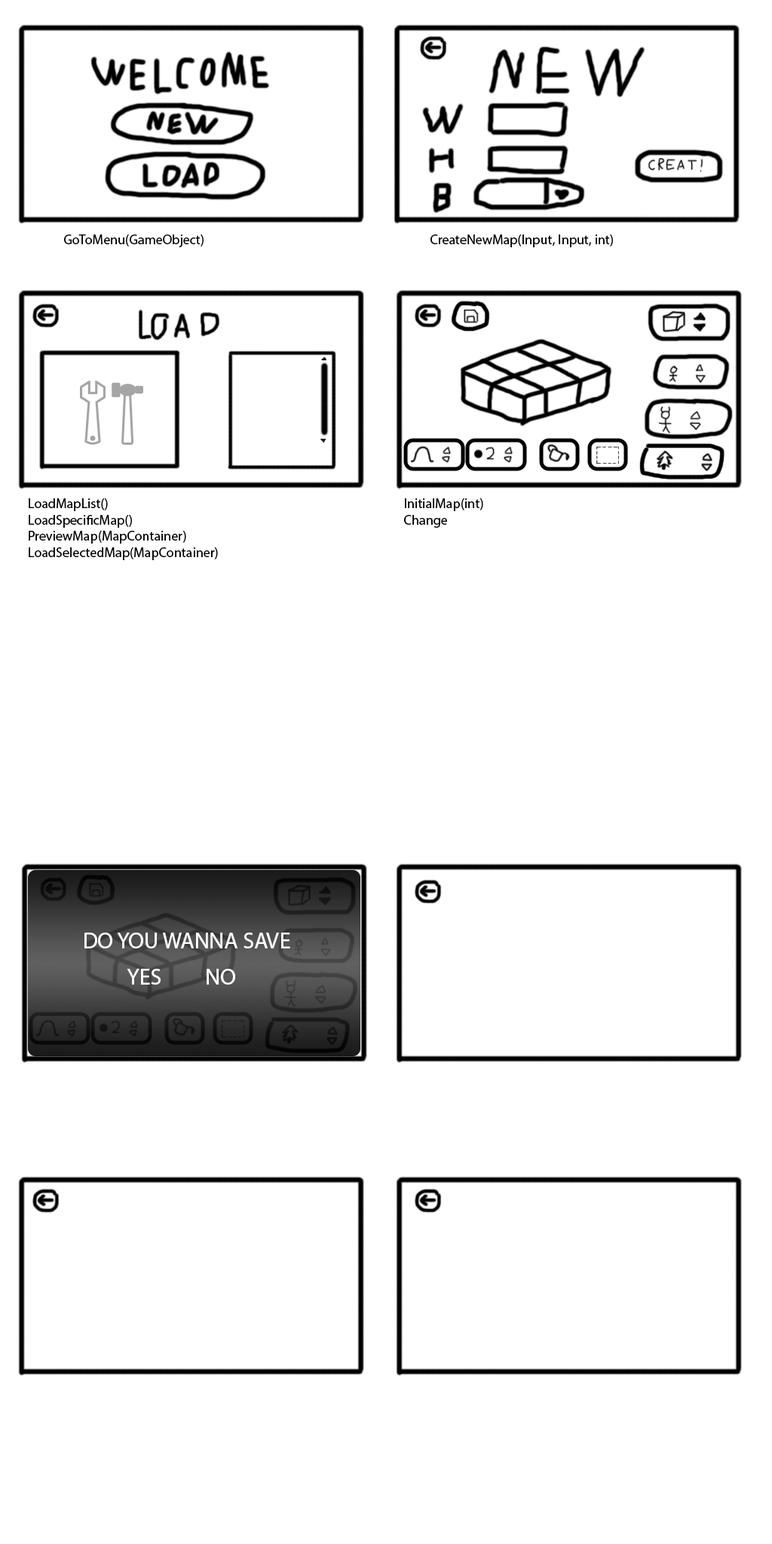
<style>
.page{position:relative;width:772px;height:1544px;background:#ffffff}
.page>*{position:absolute;margin:0}
.t1{font:13.6px "MyriadHebrew-Regular";color:#000000}
.t2{font:22.6px "MyriadHebrew-Regular";color:#ffffff}
</style>
<div class="page">
<p class="t1" style="left:64px;top:235px;width:140px;height:12px">GoToMenu(GameObject)</p>
<p class="t1" style="left:431px;top:235px;width:182px;height:12px">CreateNewMap(Input, Input, int)</p>
<p class="t1" style="left:29px;top:498px;width:189px;height:62px">LoadMapList()<br>LoadSpecificMap()<br>PreviewMap(MapContainer)<br>LoadSelectedMap(MapContainer)</p>
<p class="t1" style="left:404px;top:498px;width:79px;height:30px">InitialMap(int)<br>Change</p>
<p class="t2" style="left:84px;top:933px;width:206px;height:16px">DO YOU WANNA SAVE</p>
<p class="t2" style="left:127px;top:969px;width:34px;height:16px">YES</p>
<p class="t2" style="left:207px;top:969px;width:28px;height:16px">NO</p>
</div>
